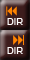
<style>
.page{position:relative;width:30px;height:60px}
.page>*{position:absolute;margin:0}
.t1{font:10.7px "SimianText-Orangutan";color:#ffffff}
</style>
<div class="page">
<p class="t1" style="left:7px;top:18px;width:16px;height:7px">DIR</p>
<p class="t1" style="left:7px;top:47px;width:16px;height:7px">DIR</p>
</div>
